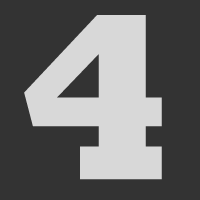
<style>
.page{position:relative;width:200px;height:200px;background:#333333}
.page>*{position:absolute;margin:0}
.t1{font:236.9px "Rockwell-ExtraBold";color:#d8d8d8}
</style>
<div class="page">
<p class="t1" style="left:24px;top:15px;width:138px;height:165px">4</p>
</div>
